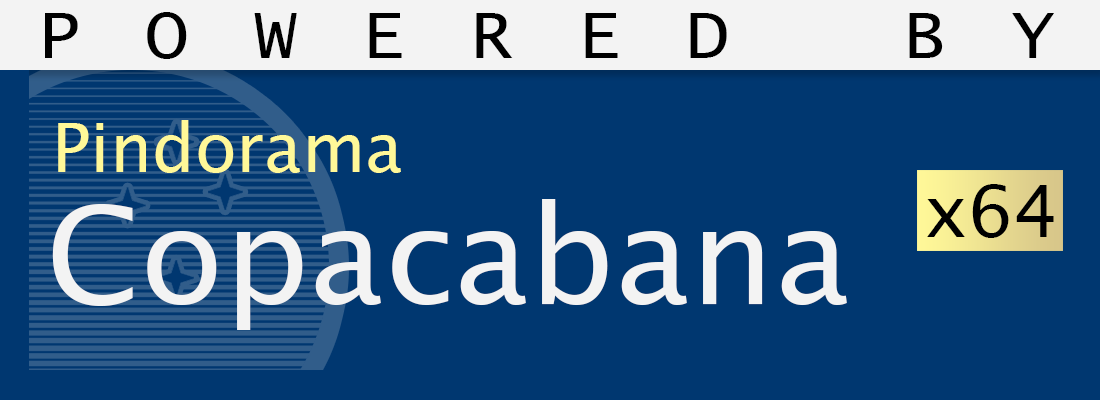
<style>
.page{position:relative;width:1100px;height:400px;background:#003770}
.page>*{position:absolute;margin:0}
.t1{font:72px "LucidaConsole";letter-spacing:0.9em;color:#000000}
.t2{font:68.2px "LucidaSansUnicode";color:#fff898}
.t3{font:72px "LucidaSansUnicode";color:#000000}
.t4{font:136.5px "LucidaSansUnicode";color:#f3f3f3}
</style>
<div class="page">
<p class="t1" style="left:45px;top:12px;width:1009px;height:47px">POWERED BY</p>
<p class="t2" style="left:58px;top:120px;width:343px;height:53px">Pindorama</p>
<p class="t3" style="left:927px;top:184px;width:127px;height:54px">x64</p>
<p class="t4" style="left:52px;top:199px;width:795px;height:131px">Copacabana</p>
</div>
